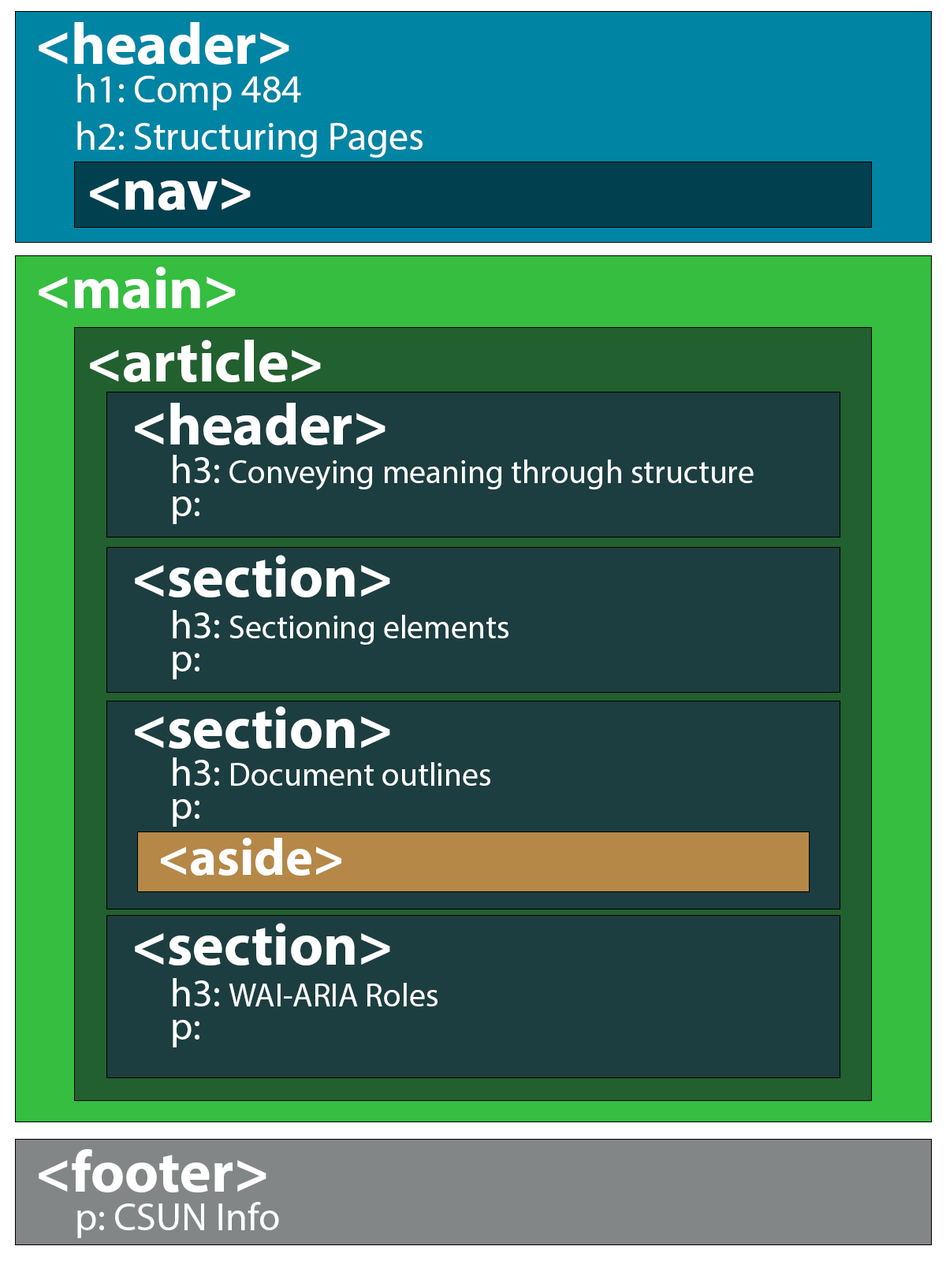
<style>
.page{position:relative;width:946px;height:1261px;background:#1c3e40}
.page>*{position:absolute;margin:0}
.t1{font:59.1px "MyriadPro-Bold";color:#ffffff}
.t2{font:39.4px "MyriadPro-Regular";color:#ffffff}
.t3{font:32.8px/32.8px "MyriadPro-Regular";color:#ffffff}
.t4{font:39.4px/32.8px "MyriadPro-Regular";color:#ffffff}
.t5{font:52.5px "MyriadPro-Bold";color:#ffffff}
</style>
<div class="page">
<p class="t1" style="left:39px;top:22px;width:250px;height:43px">&lt;header&gt;</p>
<p class="t2" style="left:77px;top:74px;width:345px;height:84px">h1: Comp 484<br>h2: Structuring Pages</p>
<p class="t1" style="left:90px;top:178px;width:161px;height:32px">&lt;nav&gt;</p>
<p class="t1" style="left:39px;top:266px;width:197px;height:43px">&lt;main&gt;</p>
<p class="t1" style="left:90px;top:340px;width:231px;height:42px">&lt;article&gt;</p>
<p class="t1" style="left:135px;top:403px;width:250px;height:42px">&lt;header&gt;</p>
<p class="t3" style="left:173px;top:455px;width:580px;height:69px"><span class="t4">h3: </span>Conveying meaning through structure<br><span class="t4">p:</span></p>
<p class="t1" style="left:135px;top:555px;width:255px;height:42px">&lt;section&gt;</p>
<p class="t3" style="left:173px;top:610px;width:335px;height:69px"><span class="t4">h3: </span>Sectioning elements<br><span class="t4">p:</span></p>
<p class="t1" style="left:135px;top:706px;width:255px;height:43px">&lt;section&gt;</p>
<p class="t3" style="left:173px;top:757px;width:317px;height:70px"><span class="t4">h3: </span>Document outlines<br><span class="t4">p:</span></p>
<p class="t5" style="left:161px;top:838px;width:180px;height:38px">&lt;aside&gt;</p>
<p class="t1" style="left:135px;top:923px;width:255px;height:42px">&lt;section&gt;</p>
<p class="t3" style="left:173px;top:978px;width:264px;height:69px"><span class="t4">h3: </span>WAI-ARIA Roles<br><span class="t4">p:</span></p>
<p class="t1" style="left:39px;top:1149px;width:227px;height:43px">&lt;footer&gt;</p>
<p class="t2" style="left:77px;top:1202px;width:202px;height:36px">p: CSUN Info</p>
</div>
